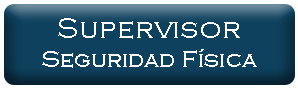
<style>
.page{position:relative;width:298px;height:88px;background:#0e415e}
.page>*{position:absolute;margin:0}
.t1{font:24px "CopperplateGothic-Light";color:#ffffff}
.t2{font:30px "CopperplateGothic-Light";color:#ffffff}
</style>
<div class="page">
<p class="t1" style="left:42px;top:18px;width:215px;height:50px;text-align:center"><span class="t2">Supervisor<br></span>Seguridad Física</p>
</div>
